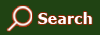
<style>
.page{position:relative;width:100px;height:35px;background:#204313}
.page>*{position:absolute;margin:0}
.t1{font:15.1px "Verdana-Bold";color:#fefffd;scale:0.95 1}
</style>
<div class="page">
<p class="t1" style="left:38px;top:12px;width:54px;height:12px">Search</p>
</div>
